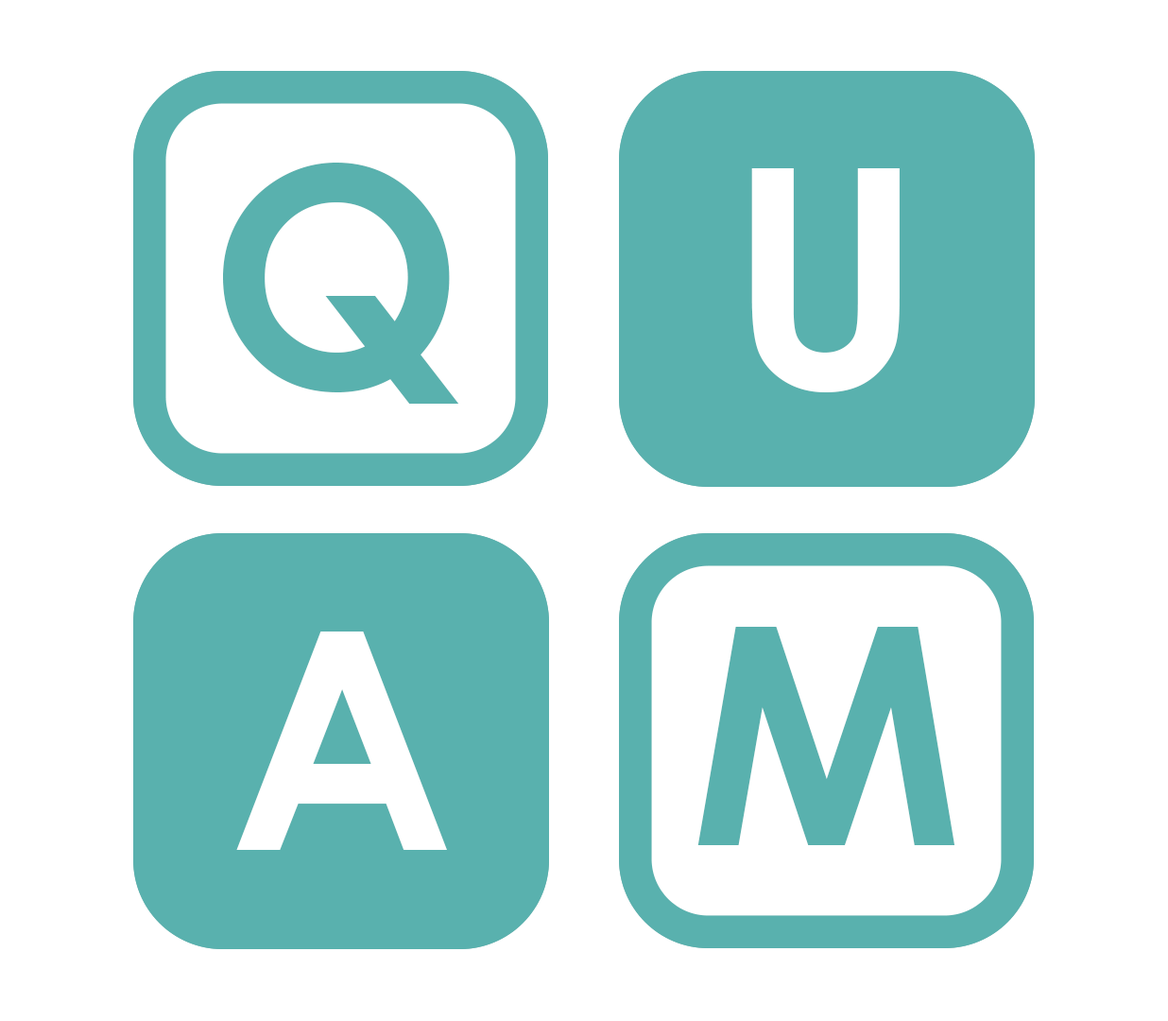
<style>
.page{position:relative;width:1168px;height:1021px;background:#ffffff}
.page>*{position:absolute;margin:0}
.t1{font:303.3px "CenturyGothic-Bold";color:#59b1ae}
.t2{font:303.3px "CenturyGothic-Bold";color:#ffffff}
</style>
<div class="page">
<p class="t1" style="left:223px;top:163px;width:236px;height:241px">Q</p>
<p class="t2" style="left:751px;top:168px;width:149px;height:224px">U</p>
<p class="t1" style="left:698px;top:627px;width:258px;height:218px">M</p>
<p class="t2" style="left:236px;top:631px;width:211px;height:219px">A</p>
</div>
